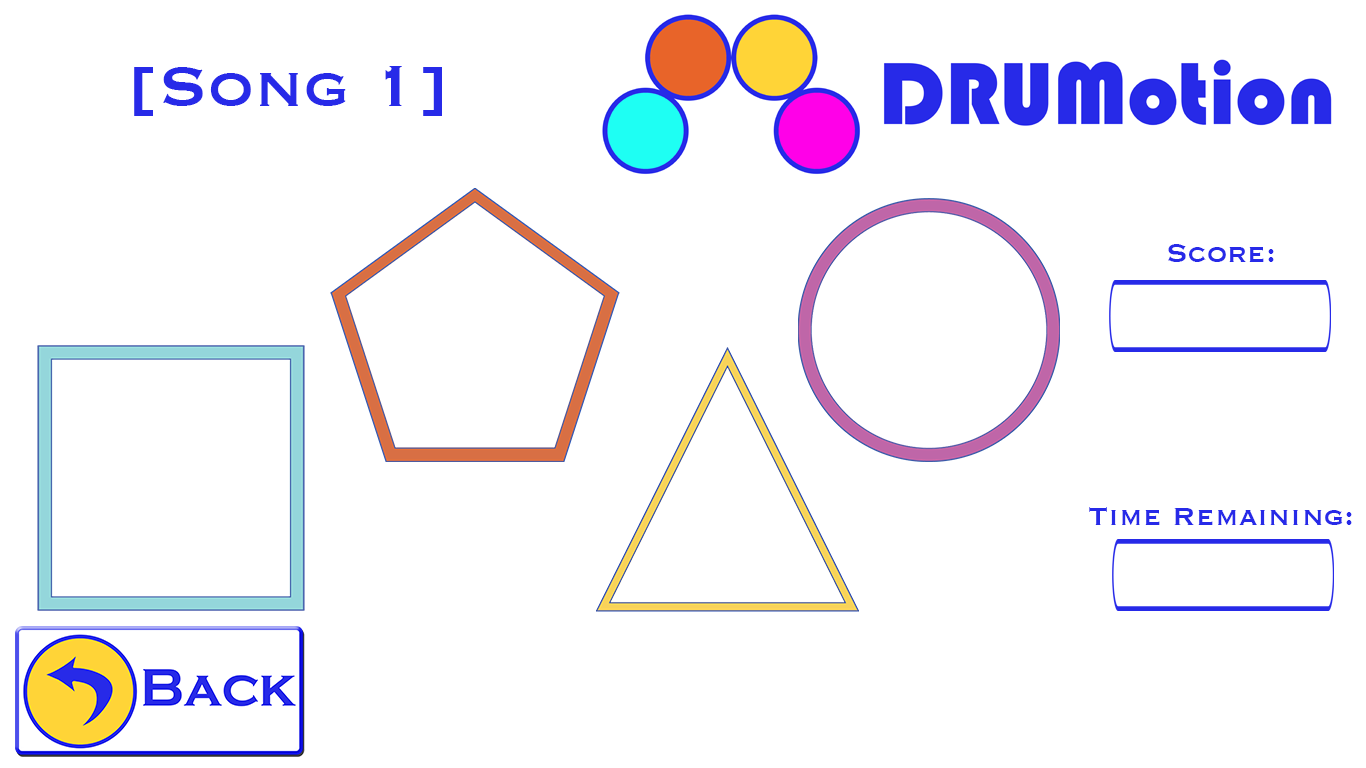
<style>
.page{position:relative;width:1366px;height:768px;background:#ffffff}
.page>*{position:absolute;margin:0}
.t1{font:75px "Copperplate";color:#272ae8}
.t2{font:33.3px "Copperplate";color:#272ae8}
</style>
<div class="page">
<p class="t1" style="left:134px;top:66px;width:308px;height:50px">[Song 1]</p>
<p class="t2" style="left:1168px;top:244px;width:106px;height:18px">Score:</p>
<p class="t2" style="left:1089px;top:507px;width:263px;height:18px">Time Remaining:</p>
</div>
